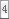
<style>
.page{position:relative;width:9px;height:19px;background:#a5a2a5}
.page>*{position:absolute;margin:0}
.t1{font:12px "SimSun";color:#666666}
</style>
<div class="page">
<p class="t1" style="left:2px;top:5px;width:5px;height:8px">4</p>
</div>
